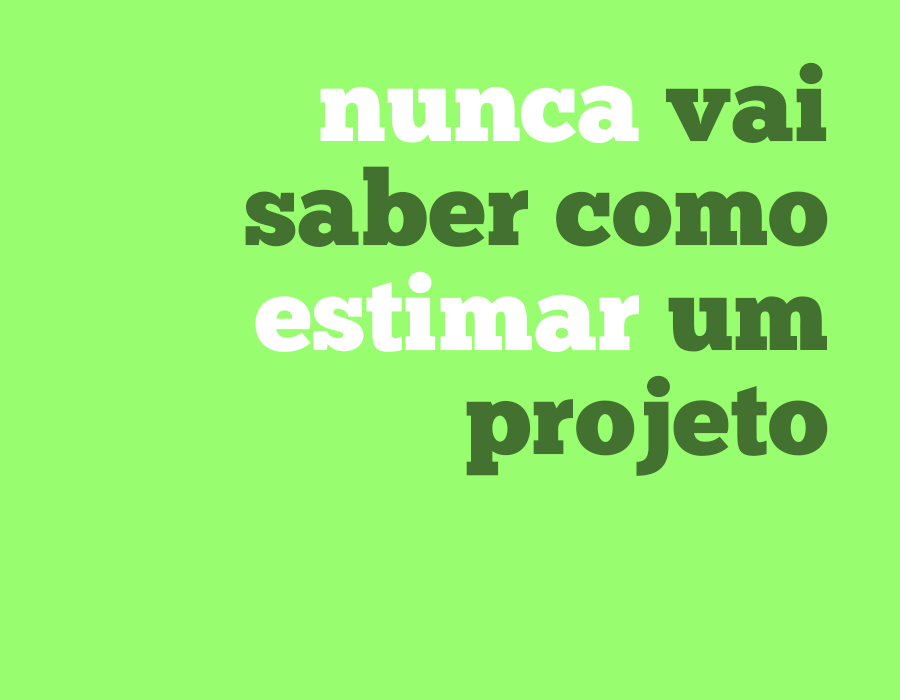
<style>
.page{position:relative;width:900px;height:700px;background:#98fd6f}
.page>*{position:absolute;margin:0}
.t1{font:104.5px/104.5px "ChunkFive-Roman";color:#437230}
.t2{font:104.5px/104.5px "ChunkFive-Roman";color:#ffffff}
</style>
<div class="page">
<p class="t1" style="left:245px;top:62px;width:583px;height:414px;text-align:right"><span class="t2">nunca</span> vai<br>saber como<br><span class="t2">estimar</span> um<br>projeto</p>
</div>
